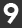
<style>
.page{position:relative;width:22px;height:28px;background:#333333}
.page>*{position:absolute;margin:0}
.t1{font:30px "ProductSans-Bold";color:#ffffff}
</style>
<div class="page">
<p class="t1" style="left:3px;top:3px;width:16px;height:21px">9</p>
</div>
